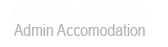
<style>
.page{position:relative;width:168px;height:47px;background:#ffffff}
.page>*{position:absolute;margin:0}
.t1{font:15.9px "ArialMT";color:#b7b4b4;scale:0.88 1}
</style>
<div class="page">
<p class="t1" style="left:14px;top:24px;width:131px;height:12px">Admin Accomodation</p>
</div>
